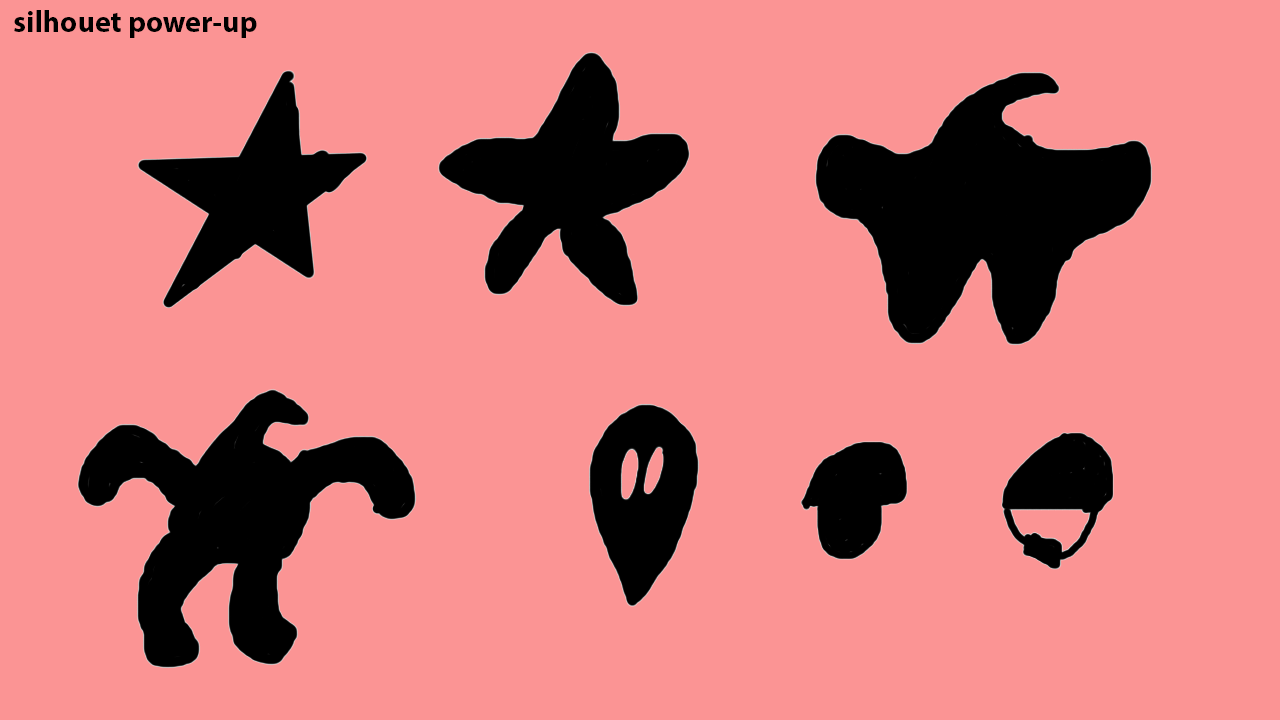
<style>
.page{position:relative;width:1280px;height:720px;background:#fb9494}
.page>*{position:absolute;margin:0}
.t1{font:30px "MyriadPro-Bold";color:#000000}
</style>
<div class="page">
<p class="t1" style="left:14px;top:10px;width:243px;height:28px">silhouet power-up</p>
</div>
